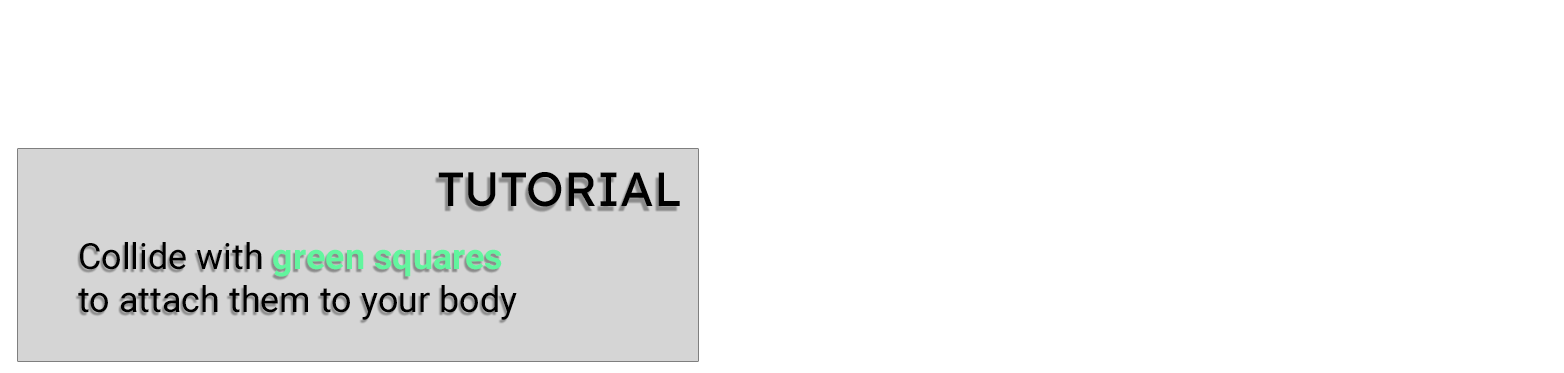
<style>
.page{position:relative;width:1564px;height:373px;background:#ffffff}
.page>*{position:absolute;margin:0}
.t1{font:48px "LexendDeca-Regular";color:#000000}
.t2{font:36px "Roboto-Regular";color:#000000}
.t3{font:36px "Roboto-Bold";color:#62f59e}
</style>
<div class="page">
<p class="t1" style="left:438px;top:172px;width:242px;height:35px">TUTORIAL</p>
<p class="t2" style="left:78px;top:242px;width:439px;height:78px">Collide with <span class="t3">green squares<br></span>to attach them to your body</p>
</div>
